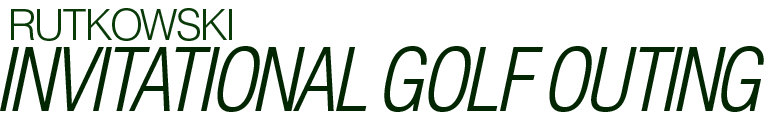
<style>
.page{position:relative;width:773px;height:122px;background:#ffffff}
.page>*{position:absolute;margin:0}
.t1{font:42.6px "HelveticaLTStd-Light";letter-spacing:-0.06em;color:#093a08}
.t2{font:85.2px "HelveticaLTStd-LightCondObl";letter-spacing:-0.06em;color:#022601}
</style>
<div class="page">
<p class="t1" style="left:11px;top:8px;width:221px;height:33px">RUTKOWSKI</p>
<p class="t2" style="left:0px;top:46px;width:764px;height:66px">INVITATIONAL GOLF OUTING</p>
</div>
